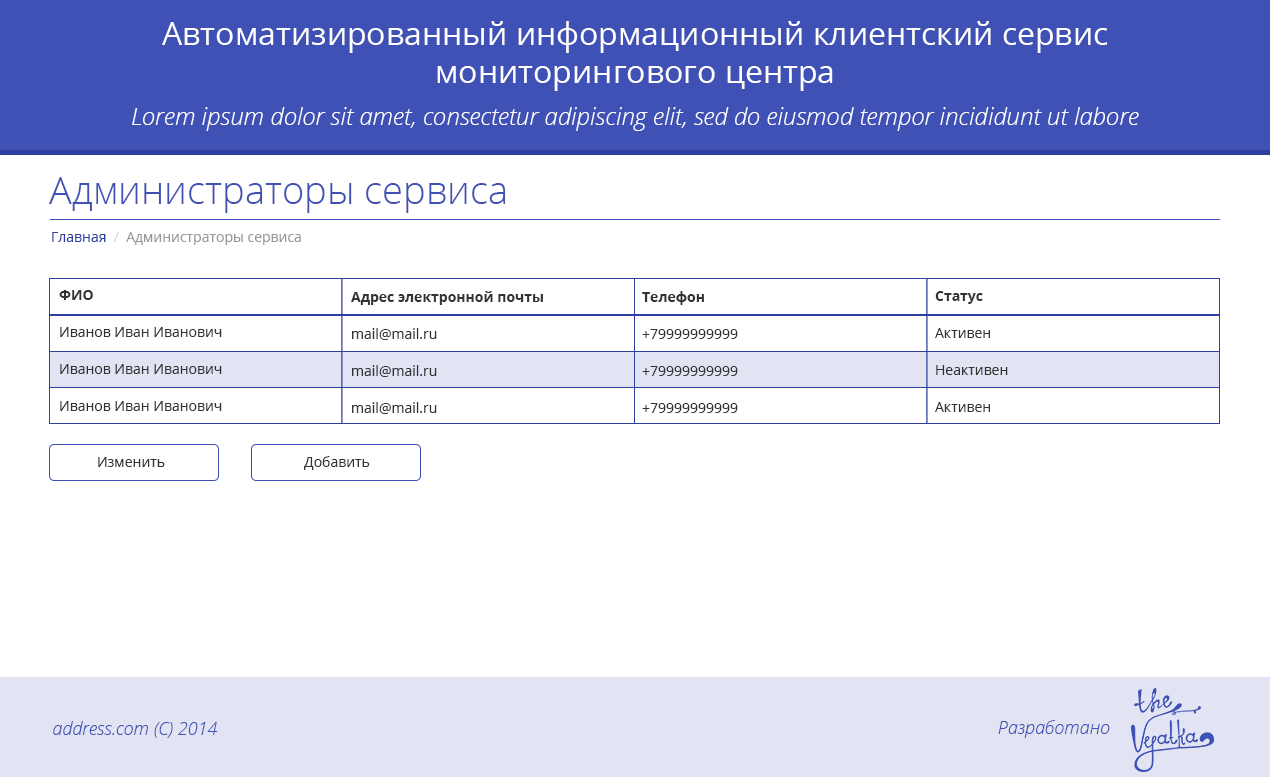
<style>
.page{position:relative;width:1270px;height:777px;background:#ffffff}
.page>*{position:absolute;margin:0}
.t1{font:32px "OpenSans";color:#ffffff}
.t2{font:24px "OpenSansLight-Italic";color:#ffffff}
.t3{font:38px "OpenSans-Light";color:#3f51b5}
.t4{font:14px "OpenSans";color:#999999}
.t5{font:14px "OpenSans";color:#303f9f}
.t6{font:14px "OpenSans";color:#d8d8d8}
.t7{font:14px/37px "OpenSans";color:#333333}
.t8{font:14px/37px "OpenSans-Bold";color:#333333}
.t9{font:14px "OpenSans";color:#333333}
.t10{font:18px "OpenSansLight-Italic";color:#3f51b5}
</style>
<div class="page">
<p class="t1" style="left:162px;top:21px;width:946px;height:70px;text-align:center">Автоматизированный информационный клиентский сервис<br>мониторингового центра</p>
<p class="t2" style="left:132px;top:107px;width:1007px;height:24px">Lorem ipsum dolor sit amet, consectetur adipiscing elit, sed do eiusmod tempor incididunt ut labore</p>
<p class="t3" style="left:49px;top:177px;width:457px;height:36px">Администраторы сервиса</p>
<p class="t4" style="left:52px;top:232px;width:249px;height:13px"><span class="t5">Главная  </span><span class="t6">/</span>  Администраторы сервиса</p>
<p class="t7" style="left:59px;top:290px;width:163px;height:121px"><span class="t8">ФИО<br></span>Иванов Иван Иванович<br>Иванов Иван Иванович<br>Иванов Иван Иванович</p>
<p class="t7" style="left:351px;top:291px;width:192px;height:123px"><span class="t8">Адрес электронной почты<br></span>mail@mail.ru<br>mail@mail.ru<br>mail@mail.ru</p>
<p class="t7" style="left:642px;top:291px;width:96px;height:122px"><span class="t8">Телефон<br></span>+79999999999<br>+79999999999<br>+79999999999</p>
<p class="t7" style="left:935px;top:291px;width:73px;height:121px"><span class="t8">Статус<br></span>Активен<br>Неактивен<br>Активен</p>
<p class="t9" style="left:98px;top:457px;width:67px;height:10px">Изменить</p>
<p class="t9" style="left:304px;top:456px;width:66px;height:14px">Добавить</p>
<p class="t10" style="left:53px;top:721px;width:165px;height:17px">address.com (C) 2014</p>
<p class="t10" style="left:998px;top:720px;width:112px;height:18px">Разработано</p>
</div>
